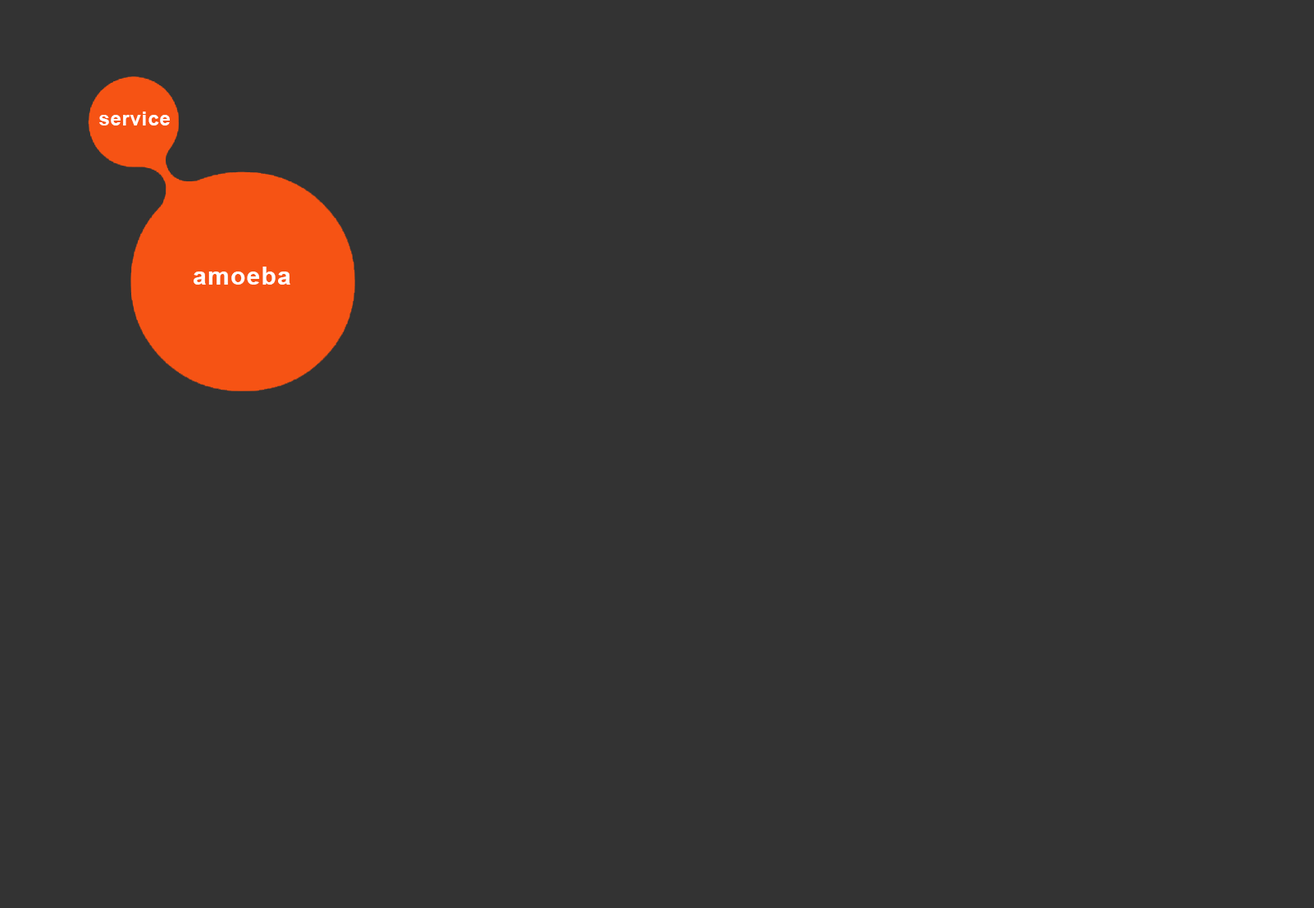
<style>
.page{position:relative;width:1314px;height:908px;background:#333333}
.page>*{position:absolute;margin:0}
.t1{font:19.7px "Arial-BoldMT";letter-spacing:0.04em;color:#ffffff}
.t2{font:24.6px "Arial-BoldMT";letter-spacing:0.04em;color:#ffffff}
</style>
<div class="page">
<p class="t1" style="left:99px;top:112px;width:71px;height:13px">service</p>
<p class="t2" style="left:194px;top:266px;width:96px;height:19px">amoeba</p>
</div>
